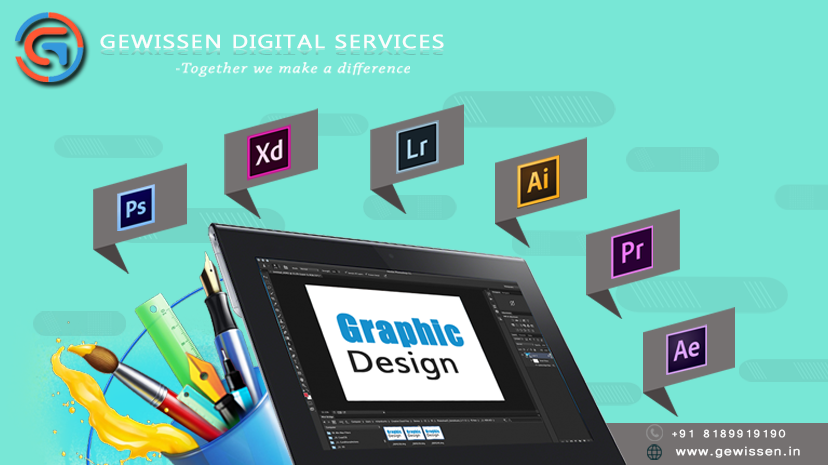
<style>
.page{position:relative;width:828px;height:465px;background:#78e7d6}
.page>*{position:absolute;margin:0}
.t1{font:19px "MicrosoftPhagsPa";letter-spacing:0.05em;color:#fcfcfc;font-weight:bold;scale:1.22 1}
.t2{font:8.1px "MicrosoftPhagsPa";letter-spacing:0.05em;font-weight:bold;scale:2.87 1}
.t3{font:14.5px "ChaparralPro-LightIt";letter-spacing:0.05em;color:#fdfffe;font-weight:bold;scale:1.2 1}
.t4{font:13.3px "Microsoft-Yi-Baiti";letter-spacing:0.04em;color:#ffffff;font-weight:bold;scale:1.09 1}
.t5{font:15.4px "Microsoft-Yi-Baiti";letter-spacing:0.04em;color:#ffffff;font-weight:bold;scale:1.21 1}
</style>
<div class="page">
<p class="t1" style="left:100px;top:34px;width:344px;height:15px">GEWISSEN DIGITAL SERVICES</p>
<p class="t2" style="left:100px;top:49px;width:344px;height:6px">GEWISSEN DIGITAL SERVICES</p>
<p class="t3" style="left:176px;top:62px;width:234px;height:15px">-Together we make a difference</p>
<p class="t4" style="left:672px;top:429px;width:114px;height:9px">+91 8189919190</p>
<p class="t5" style="left:675px;top:446px;width:125px;height:12px">www.gewissen.in</p>
</div>
